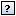
<style>
.page{position:relative;width:16px;height:16px;background:#000000}
.page>*{position:absolute;margin:0}
.t1{font:10px "Verdana-Bold";color:#000000}
</style>
<div class="page">
<p class="t1" style="left:5px;top:5px;width:5px;height:7px">?</p>
</div>
